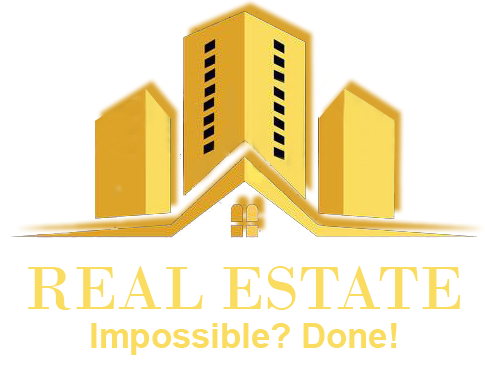
<style>
.page{position:relative;width:485px;height:375px;background:#ffffff}
.page>*{position:absolute;margin:0}
.t1{font:64px "BodoniMT";color:#fadc61}
.t2{font:34.7px "Arial-BoldMT";color:#fadc61}
</style>
<div class="page">
<p class="t1" style="left:28px;top:266px;width:432px;height:44px">REAL ESTATE</p>
<p class="t2" style="left:91px;top:323px;width:306px;height:32px">Impossible? Done!</p>
</div>
